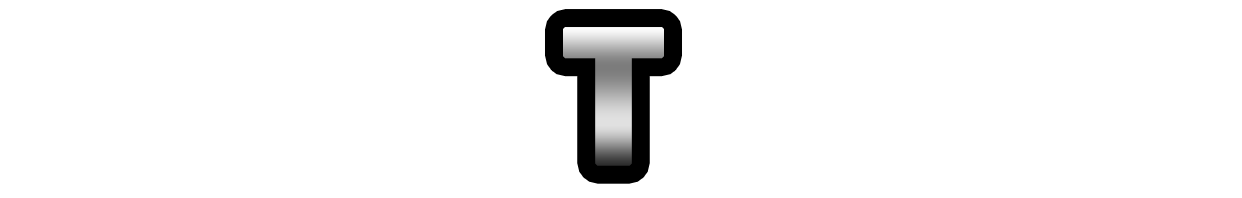
<style>
.page{position:relative;width:1242px;height:198px;background:#ffffff}
.page>*{position:absolute;margin:0}
.t1{font:215px "DOSIyagiMedium";letter-spacing:0.16em;font-weight:bold;scale:1.2 1}
</style>
<div class="page">
<p class="t1" style="left:563px;top:27px;width:101px;height:139px">T</p>
</div>
